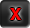
<style>
.page{position:relative;width:30px;height:28px}
.page>*{position:absolute;margin:0}
.t1{font:17px "Helvetica-Bold";color:#ff0000}
</style>
<div class="page">
<p class="t1" style="left:10px;top:8px;width:11px;height:12px">X</p>
</div>
